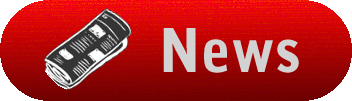
<style>
.page{position:relative;width:352px;height:101px}
.page>*{position:absolute;margin:0}
.t1{font:60px "BellGothicStd-Black";color:#d2d2d2}
</style>
<div class="page">
<p class="t1" style="left:163px;top:28px;width:136px;height:45px">News</p>
</div>
